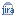
<style>
.page{position:relative;width:16px;height:16px;background:#ffffff}
.page>*{position:absolute;margin:0}
.t1{font:9px "Tahoma";color:#2b5790}
</style>
<div class="page">
<p class="t1" style="left:2px;top:6px;width:12px;height:9px">jira</p>
</div>
